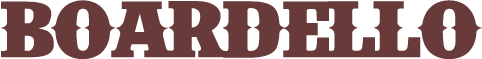
<style>
.page{position:relative;width:482px;height:59px;background:#683a3a}
.page>*{position:absolute;margin:0}
.t1{font:111.4px "IFCINSANERODEOBOLD-Bold";letter-spacing:-0.025em;color:#683a3a;scale:1.11 1}
</style>
<div class="page">
<p class="t1" style="left:1px;top:0px;width:481px;height:59px">BOARDELLO</p>
</div>
